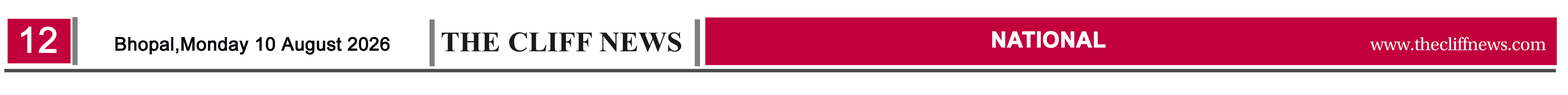
<style>
.page{position:relative;width:1568px;height:95px;background:#ffffff}
.page>*{position:absolute;margin:0}
.t1{font:35.2px "ArialMT";color:#ffffff;font-weight:bold}
.t2{font:18.4px "ArialMT";color:#010102;font-weight:bold}
.t3{font:21.8px "Arial-BoldMT";color:#ffffff;font-weight:bold}
</style>
<div class="page">
<p class="t1" style="left:21px;top:27px;width:36px;height:26px">12</p>
<p class="t2" style="left:115px;top:37px;width:275px;height:18px">Bhopal,Monday 10 August 2026</p>
<p class="t3" style="left:992px;top:31px;width:114px;height:17px">NATIONAL</p>
</div>
